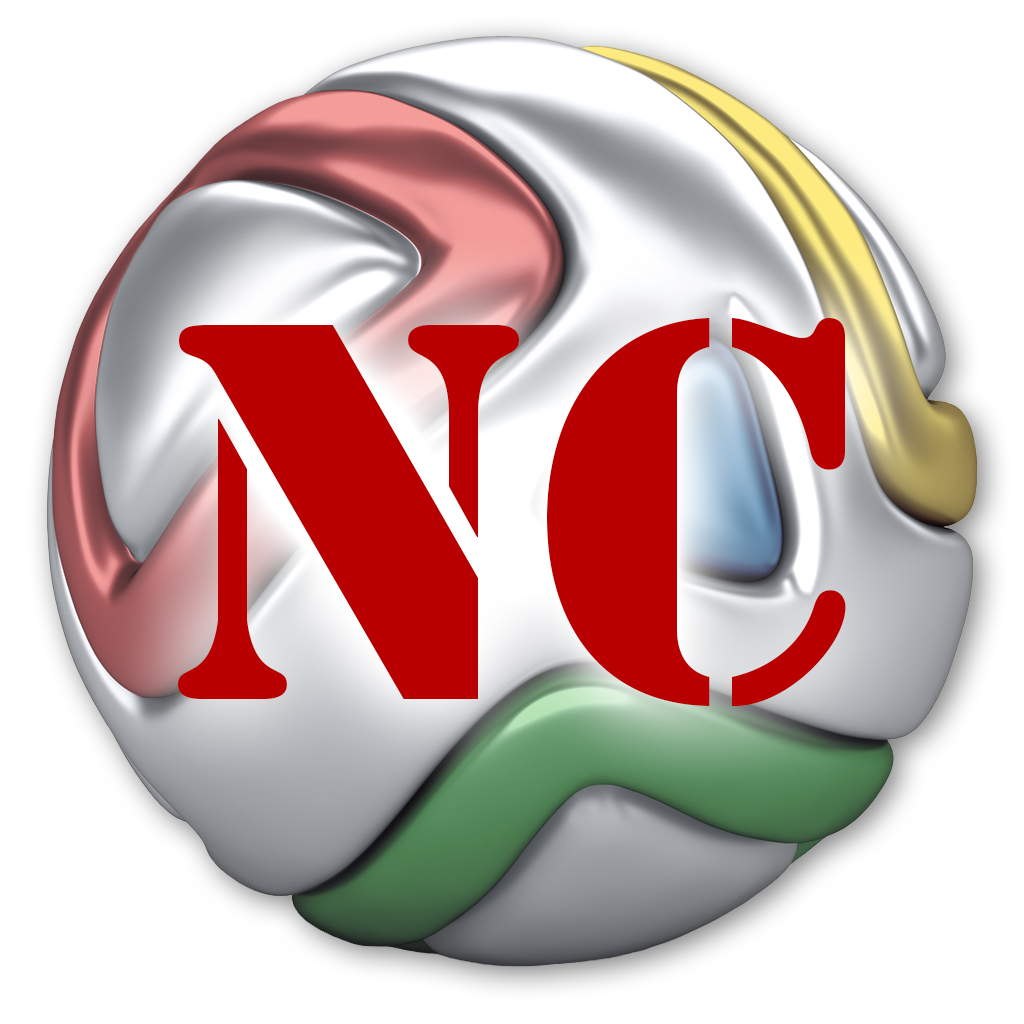
<style>
.page{position:relative;width:1024px;height:1024px;background:#ffffff}
.page>*{position:absolute;margin:0}
.t1{font:500px "StencilStd";color:#b90000}
</style>
<div class="page">
<p class="t1" style="left:178px;top:318px;width:668px;height:388px">NC</p>
</div>
